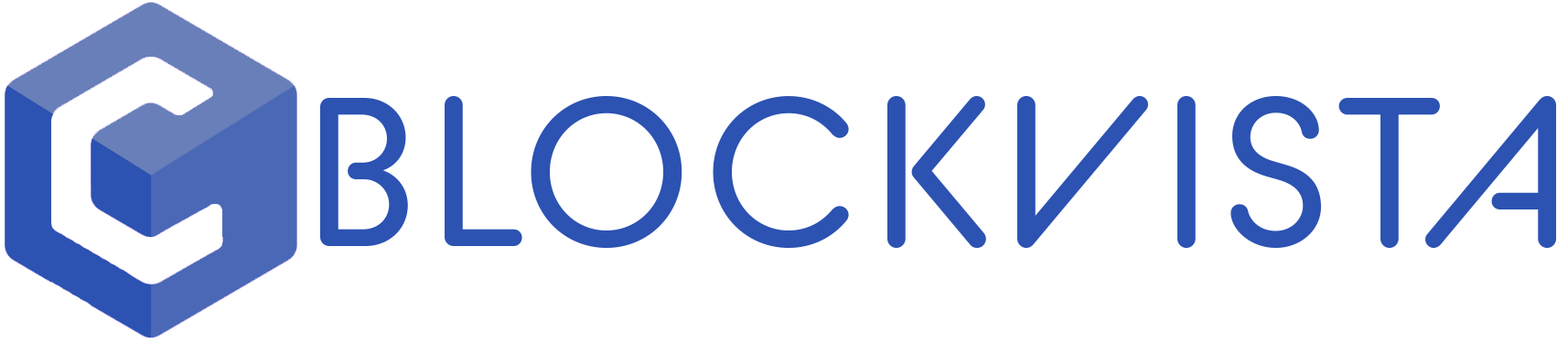
<style>
.page{position:relative;width:1568px;height:343px;background:#ffffff}
.page>*{position:absolute;margin:0}
.t1{font:211.9px "BCAlphapipeRB-Regular";letter-spacing:0.06em;color:#2c52b2}
</style>
<div class="page">
<p class="t1" style="left:320px;top:96px;width:1236px;height:152px">BLOCKVISTA</p>
</div>
